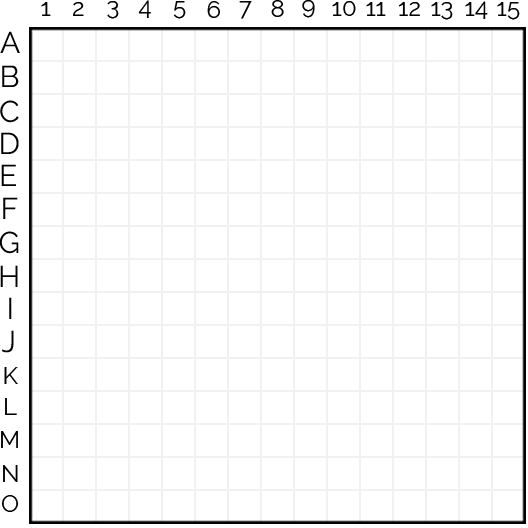
<style>
.page{position:relative;width:528px;height:528px;background:#ffffff}
.page>*{position:absolute;margin:0}
.t1{font:24px "Raleway-Regular";color:#000000}
.t2{font:30px "Raleway-Regular";color:#000000}
</style>
<div class="page">
<p class="t1" style="left:41px;top:2px;width:10px;height:14px">1</p>
<p class="t1" style="left:73px;top:2px;width:11px;height:14px">2</p>
<p class="t1" style="left:107px;top:1px;width:12px;height:18px">3</p>
<p class="t1" style="left:138px;top:0px;width:13px;height:18px">4</p>
<p class="t1" style="left:173px;top:1px;width:13px;height:18px">5</p>
<p class="t1" style="left:207px;top:1px;width:13px;height:17px">6</p>
<p class="t1" style="left:239px;top:1px;width:13px;height:18px">7</p>
<p class="t1" style="left:271px;top:0px;width:13px;height:17px">8</p>
<p class="t1" style="left:302px;top:0px;width:13px;height:18px">9</p>
<p class="t1" style="left:332px;top:1px;width:24px;height:15px">10</p>
<p class="t1" style="left:366px;top:2px;width:20px;height:14px">11</p>
<p class="t1" style="left:399px;top:2px;width:21px;height:14px">12</p>
<p class="t1" style="left:431px;top:2px;width:22px;height:18px">13</p>
<p class="t1" style="left:465px;top:1px;width:23px;height:18px">14</p>
<p class="t1" style="left:497px;top:2px;width:23px;height:18px">15</p>
<p class="t2" style="left:0px;top:31px;width:20px;height:22px">A</p>
<p class="t2" style="left:2px;top:65px;width:17px;height:22px">B</p>
<p class="t2" style="left:0px;top:100px;width:19px;height:23px">C</p>
<p class="t2" style="left:1px;top:132px;width:18px;height:22px">D</p>
<p class="t2" style="left:1px;top:164px;width:15px;height:22px">E</p>
<p class="t2" style="left:3px;top:197px;width:15px;height:22px">F</p>
<p class="t2" style="left:0px;top:231px;width:19px;height:23px">G</p>
<p class="t2" style="left:0px;top:265px;width:18px;height:22px">H</p>
<p class="t2" style="left:9px;top:297px;width:3px;height:22px">I</p>
<p class="t2" style="left:2px;top:330px;width:12px;height:23px">J</p>
<p class="t1" style="left:4px;top:367px;width:14px;height:17px">K</p>
<p class="t1" style="left:5px;top:398px;width:12px;height:17px">L</p>
<p class="t1" style="left:1px;top:431px;width:17px;height:17px">M</p>
<p class="t1" style="left:3px;top:465px;width:15px;height:17px">N</p>
<p class="t1" style="left:1px;top:495px;width:18px;height:17px">O</p>
</div>
